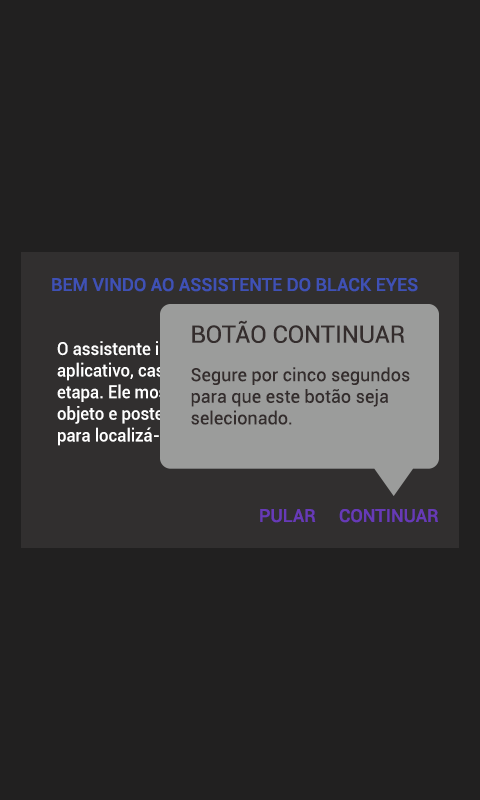
<style>
.page{position:relative;width:480px;height:800px;background:#212020}
.page>*{position:absolute;margin:0}
.t1{font:18px "Roboto-Medium";color:#3f51b5}
.t2{font:18px "Roboto-Regular";color:#342d2d}
.t3{font:24px "Roboto-Regular";color:#342d2d}
.t4{font:18px "Roboto-Medium";scale:0.93 1}
.t5{font:18px "Roboto-Medium";color:#673ab7}
</style>
<div class="page">
<p class="t1" style="left:52px;top:278px;width:366px;height:14px">BEM VINDO AO ASSISTENTE DO BLACK EYES</p>
<p class="t2" style="left:191px;top:320px;width:219px;height:105px"><span class="t3">BOTÃO CONTINUAR<br><br></span>Segure por cinco segundos <br>para que este botão seja <br>selecionado.</p>
<p class="t4" style="left:57px;top:340px;width:367px;height:106px">O assistente irá auxiliá-lo(a) á utilizar esse <br>aplicativo, caso já saiba pode pular esta <br>etapa. Ele mostrará como cadastrar um ou mais<br>objeto e posteriormente como iniciar uma busca,<br>para localizá-lo.</p>
<p class="t5" style="left:260px;top:509px;width:56px;height:14px">PULAR</p>
<p class="t5" style="left:339px;top:509px;width:99px;height:14px">CONTINUAR</p>
</div>
